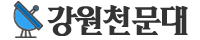
<style>
.page{position:relative;width:200px;height:40px;background:#ffffff}
.page>*{position:absolute;margin:0}
.t1{font:32.5px "HYcysM";letter-spacing:-0.2em;color:#333333;font-weight:bold;scale:1.05 1}
</style>
<div class="page">
<p class="t1" style="left:47px;top:5px;width:141px;height:31px">강원천문대</p>
</div>
